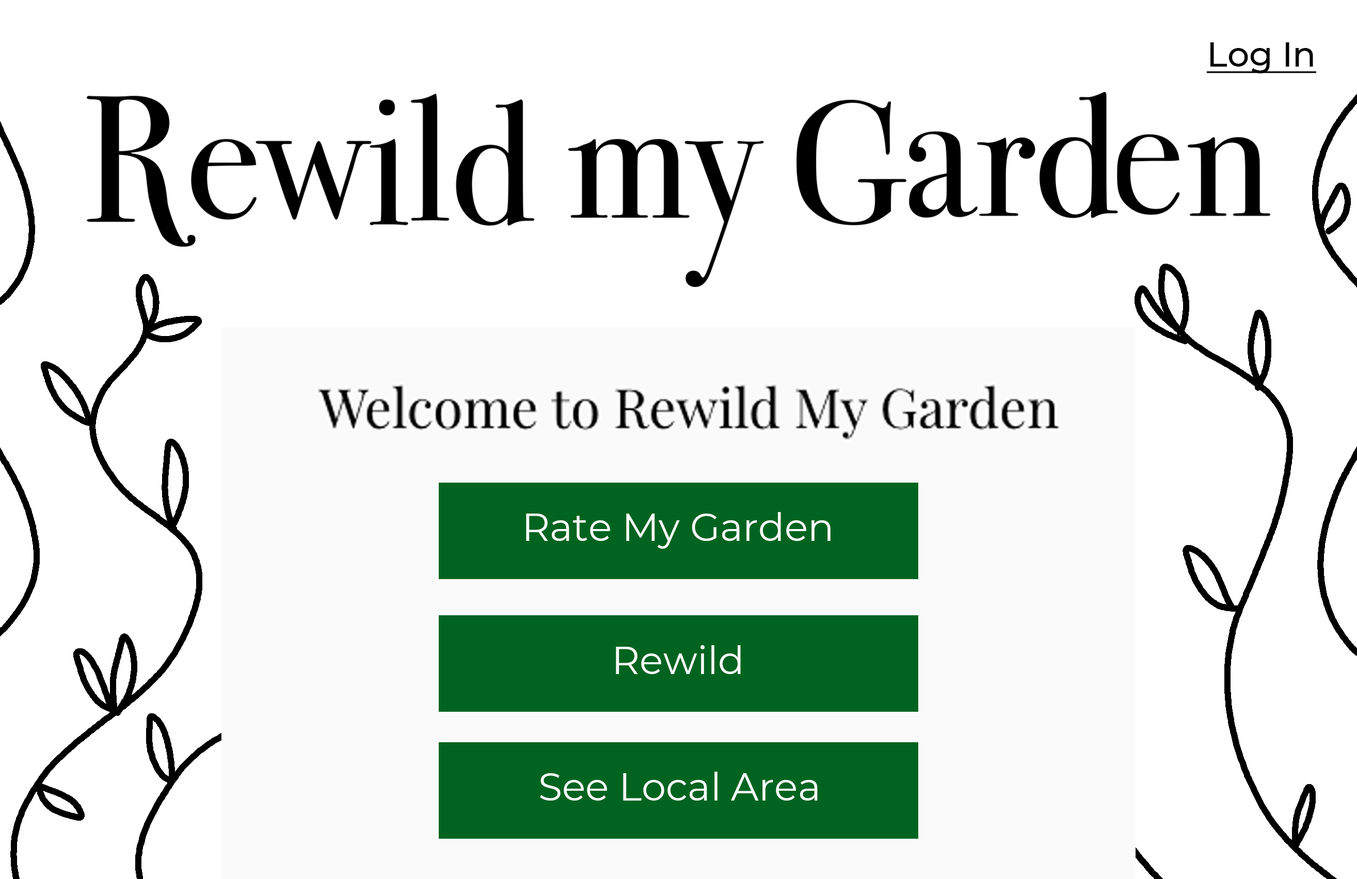
<style>
.page{position:relative;width:1357px;height:879px;background:#ffffff}
.page>*{position:absolute;margin:0}
.t1{font:34.4px "Montserrat-Medium";color:#000000;text-decoration:underline}
.t2{font:38.7px "Montserrat-Regular";color:#ffffff}
</style>
<div class="page">
<p class="t1" style="left:1206px;top:42px;width:110px;height:31px">Log In</p>
<p class="t2" style="left:526px;top:512px;width:304px;height:37px">Rate My Garden</p>
<p class="t2" style="left:616px;top:645px;width:125px;height:29px">Rewild</p>
<p class="t2" style="left:540px;top:772px;width:277px;height:28px">See Local Area</p>
</div>
